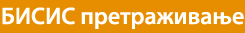
<style>
.page{position:relative;width:245px;height:33px;background:#e68d00}
.page>*{position:absolute;margin:0}
.t1{font:24px "MyriadPro-Semibold";color:#ffffff}
</style>
<div class="page">
<p class="t1" style="left:2px;top:7px;width:242px;height:22px">БИСИС претраживање</p>
</div>
